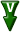
<style>
.page{position:relative;width:20px;height:32px;background:#ffffff}
.page>*{position:absolute;margin:0}
.t1{font:13.3px "MyriadPro-Bold";letter-spacing:0.007em;color:#ffffff}
</style>
<div class="page">
<p class="t1" style="left:6px;top:2px;width:9px;height:10px">V</p>
</div>
